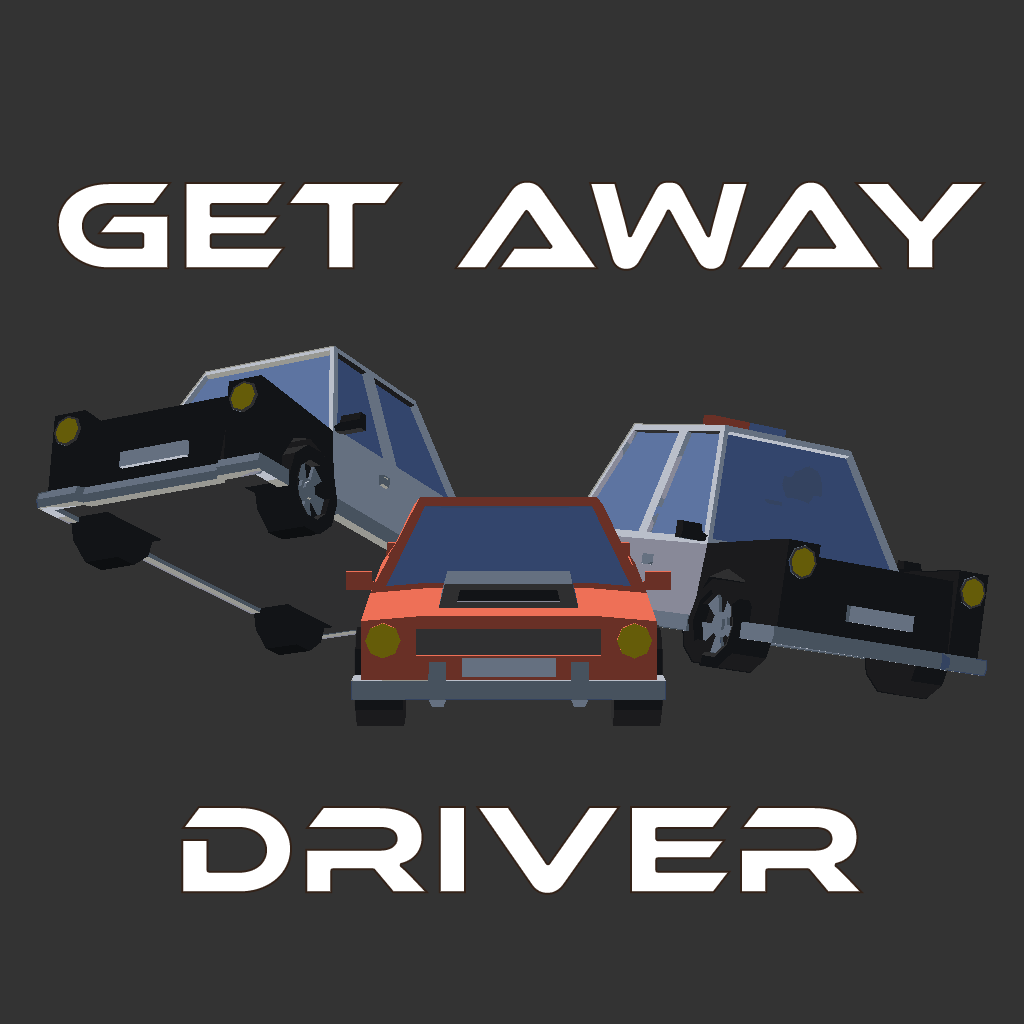
<style>
.page{position:relative;width:1024px;height:1024px;background:#333333}
.page>*{position:absolute;margin:0}
.t1{font:130px "EthnocentricRg-Regular";color:#ffffff}
</style>
<div class="page">
<p class="t1" style="left:56px;top:180px;width:930px;height:715px;text-align:center">GET AWAY<br><br><br><br>DRIVER</p>
</div>
